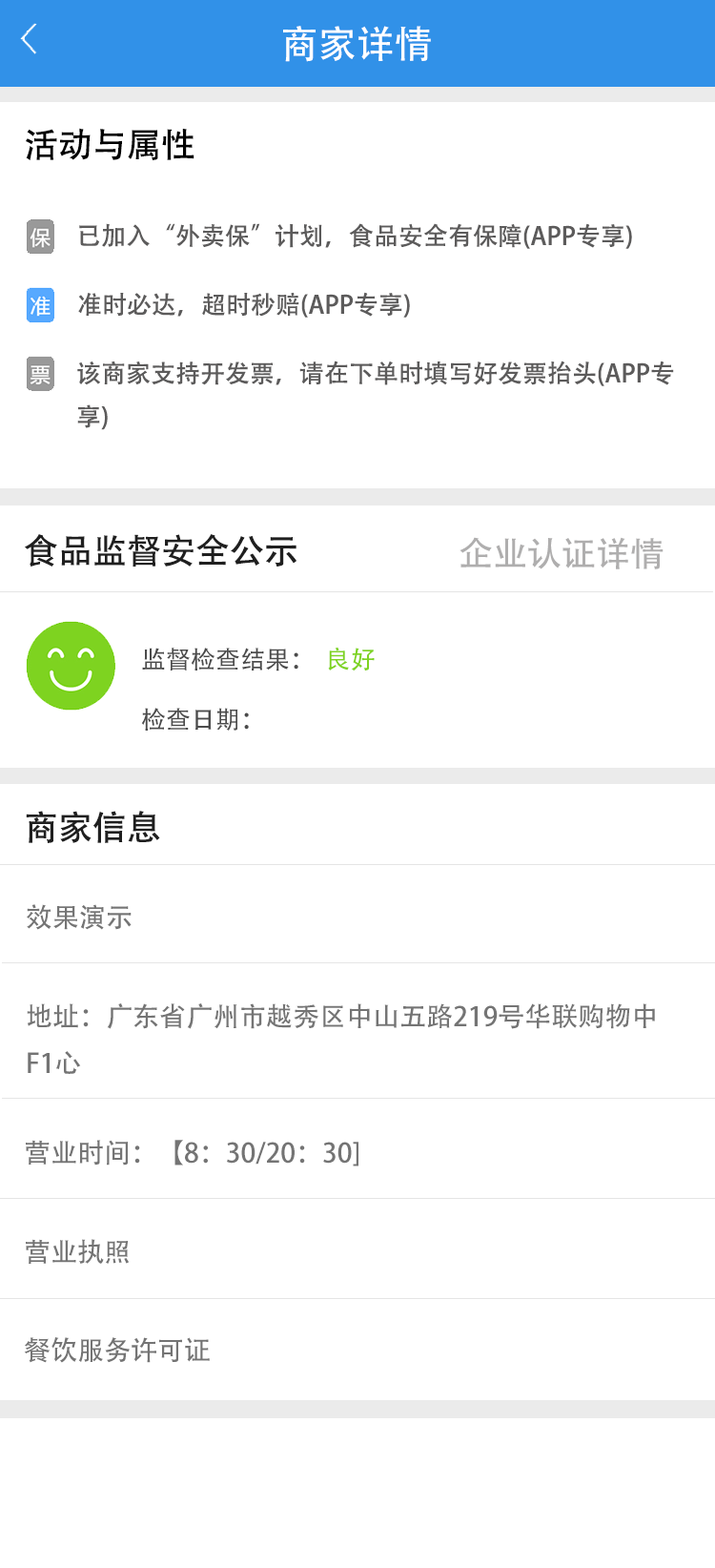
<style>
.page{position:relative;width:715px;height:1568px;background:#ffffff}
.page>*{position:absolute;margin:0}
.t1{font:38.2px "AdobeHeitiStd-Regular";color:#ffffff}
.t2{font:34.3px "AdobeHeitiStd-Regular";color:#000000}
.t3{font:24.8px "AdobeHeitiStd-Regular";color:#5c5b5b}
.t4{font:34.3px "AdobeHeitiStd-Regular";color:#1f1f1f}
.t5{font:34.3px "AdobeHeitiStd-Regular";color:#afaeae}
.t6{font:24.8px "AdobeHeitiStd-Regular";color:#4b4b4b}
.t7{font:24.8px "AdobeHeitiStd-Regular";color:#7ed320}
.t8{font:26.7px "AdobeHeitiStd-Regular";color:#747474}
</style>
<div class="page">
<p class="t1" style="left:283px;top:26px;width:148px;height:36px">商家详情</p>
<p class="t2" style="left:26px;top:128px;width:169px;height:32px">活动与属性</p>
<p class="t3" style="left:79px;top:223px;width:553px;height:26px">已加入“外卖保”计划，食品安全有保障(APP专享)</p>
<p class="t3" style="left:78px;top:292px;width:332px;height:26px">准时必达，超时秒赔(APP专享)</p>
<p class="t3" style="left:77px;top:361px;width:597px;height:69px">该商家支持开发票，请在下单时填写好发票抬头(APP专<br>享)</p>
<p class="t4" style="left:25px;top:534px;width:272px;height:33px">食品监督安全公示</p>
<p class="t5" style="left:460px;top:537px;width:204px;height:32px">企业认证详情</p>
<p class="t6" style="left:142px;top:647px;width:233px;height:24px">监督检查结果：  <span class="t7">良好</span></p>
<p class="t6" style="left:141px;top:708px;width:108px;height:23px">检查日期：</p>
<p class="t4" style="left:26px;top:811px;width:134px;height:32px">商家信息</p>
<p class="t8" style="left:27px;top:904px;width:105px;height:26px">效果演示</p>
<p class="t8" style="left:27px;top:1003px;width:628px;height:71px">地址：广东省广州市越秀区中山五路219号华联购物中<br>F1心</p>
<p class="t8" style="left:26px;top:1140px;width:333px;height:26px">营业时间：【8：30/20：30]</p>
<p class="t8" style="left:26px;top:1239px;width:104px;height:25px">营业执照</p>
<p class="t8" style="left:24px;top:1337px;width:186px;height:26px">餐饮服务许可证</p>
</div>
